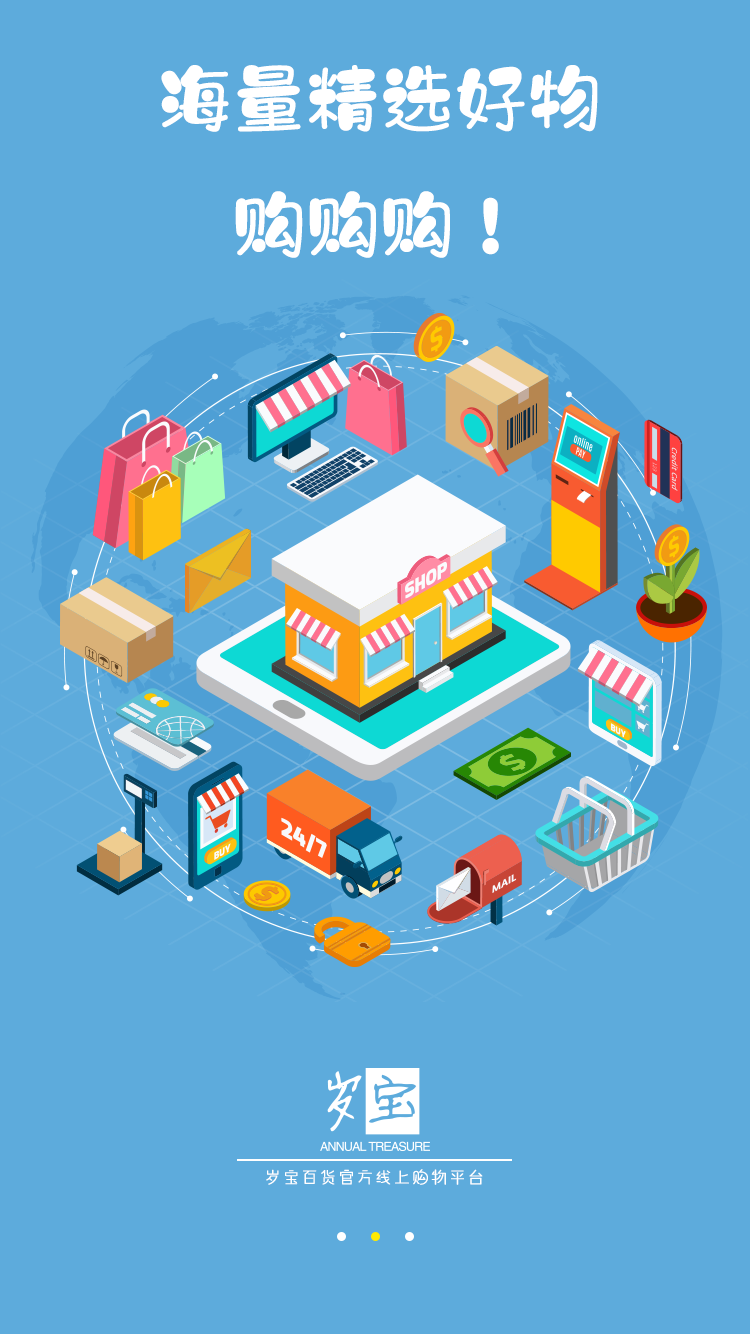
<style>
.page{position:relative;width:750px;height:1334px;background:#5dabdc}
.page>*{position:absolute;margin:0}
.t1{font:72px "HYZiYanKaTongW";color:#ffffff;font-weight:bold}
.t2{font:18px "HYYouYuanTiW";color:#ffffff;font-weight:bold}
</style>
<div class="page">
<p class="t1" style="left:161px;top:65px;width:437px;height:193px;text-align:center">海量精选好物<br>购购购！</p>
<p class="t2" style="left:266px;top:1169px;width:217px;height:16px">岁宝百货官方线上购物平台</p>
</div>
